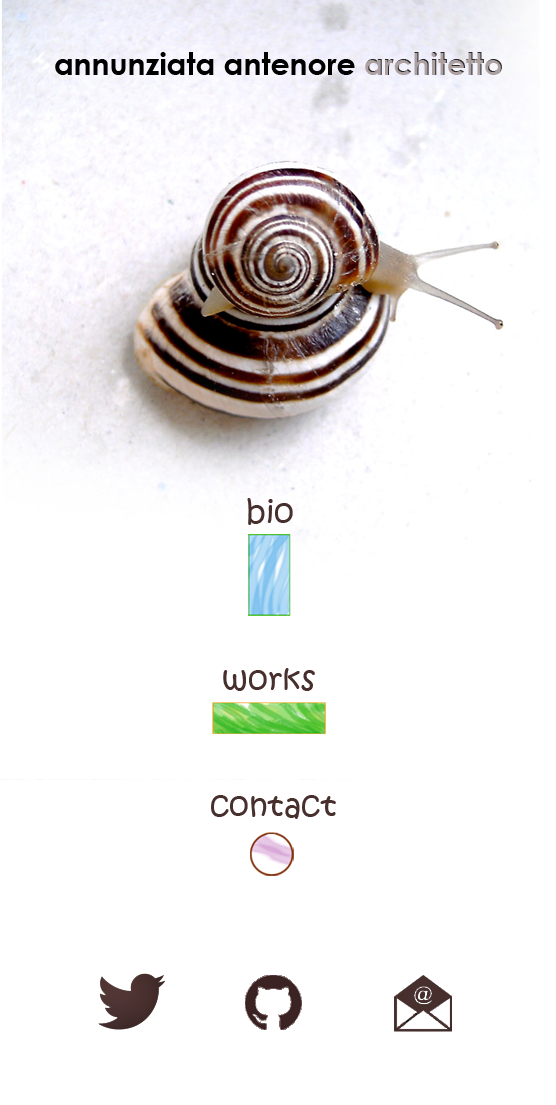
<style>
.page{position:relative;width:556px;height:1105px;background:#ffffff}
.page>*{position:absolute;margin:0}
.t1{font:30px "CenturyGothic-Bold";color:#000000}
.t2{font:30px "CenturyGothic-Bold";color:#aca0a0}
.t3{font:32.4px "KristenITC-Regular";color:#472f2d}
</style>
<div class="page">
<p class="t1" style="left:55px;top:52px;width:447px;height:23px">annunziata antenore <span class="t2">architetto</span></p>
<p class="t3" style="left:247px;top:498px;width:46px;height:27px">bio</p>
<p class="t3" style="left:223px;top:668px;width:92px;height:23px">works</p>
<p class="t3" style="left:211px;top:795px;width:125px;height:24px">contact</p>
</div>
